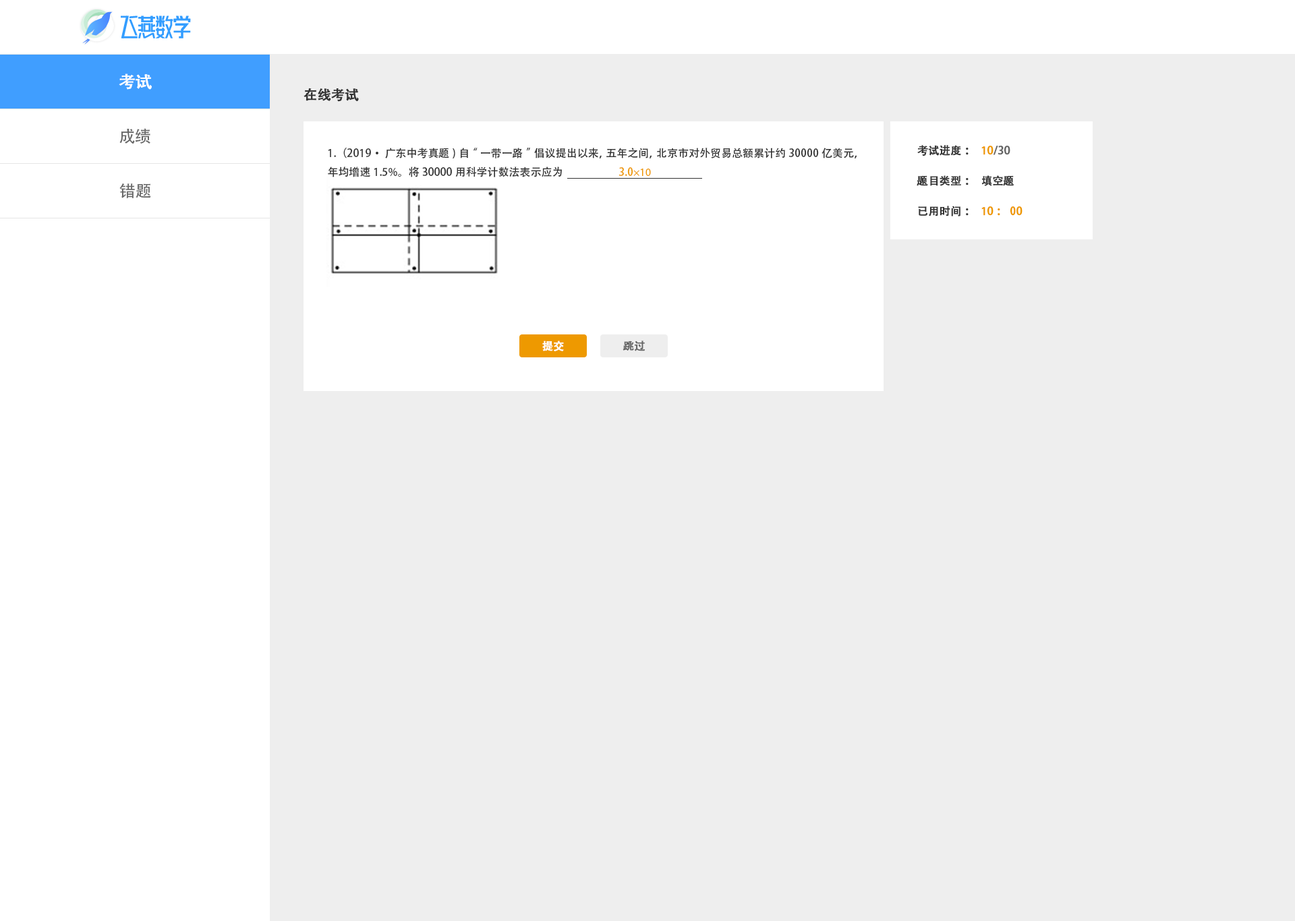
<style>
.page{position:relative;width:1295px;height:921px;background:#eeeeee}
.page>*{position:absolute;margin:0}
.t1{font:16.2px "AdobeHeitiStd-Regular";color:#ffffff;font-weight:bold}
.t2{font:13.5px "AdobeHeitiStd-Regular";color:#333333;font-weight:bold}
.t3{font:16.2px "AdobeHeitiStd-Regular";color:#666666}
.t4{font:10.8px "AdobeHeitiStd-Regular";color:#333333}
.t5{font:10.8px "AdobeHeitiStd-Regular";color:#333333;font-weight:bold}
.t6{font:10.8px "AdobeHeitiStd-Regular";color:#666666;font-weight:bold}
.t7{font:10.8px "AdobeHeitiStd-Regular";color:#ee9900;font-weight:bold}
.t8{font:10.8px "AdobeHeitiStd-Regular";color:#ee9900}
.t9{font:10.8px "MyriadPro-Regular";color:#ee9900}
.t10{font:10.8px "AdobeHeitiStd-Regular";color:#ffffff;font-weight:bold}
</style>
<div class="page">
<p class="t1" style="left:119px;top:73px;width:33px;height:17px">考试</p>
<p class="t2" style="left:303px;top:88px;width:56px;height:14px">在线考试</p>
<p class="t3" style="left:119px;top:128px;width:31px;height:16px">成绩</p>
<p class="t4" style="left:328px;top:148px;width:529px;height:29px">1.（2019·广东中考真题)自“一带一路”倡议提出以来，五年之间，北京市对外贸易总额累计约30000亿美元，年均增速1.5%。将30000用科学计数法表示应为</p>
<p class="t5" style="left:917px;top:145px;width:51px;height:11px">考试进度：</p>
<p class="t6" style="left:981px;top:146px;width:29px;height:9px"><span class="t7">１0</span>/30</p>
<p class="t8" style="left:618px;top:167px;width:33px;height:9px">3.0<span class="t9">×10</span></p>
<p class="t3" style="left:119px;top:183px;width:32px;height:15px">错题</p>
<p class="t5" style="left:916px;top:175px;width:52px;height:11px">题目类型：</p>
<p class="t5" style="left:981px;top:175px;width:33px;height:11px">填空题</p>
<p class="t5" style="left:918px;top:206px;width:50px;height:10px">已用时间：</p>
<p class="t7" style="left:981px;top:206px;width:41px;height:10px">１0：00</p>
<p class="t10" style="left:542px;top:341px;width:22px;height:10px">提交</p>
<p class="t6" style="left:622px;top:341px;width:23px;height:10px">跳过</p>
</div>
